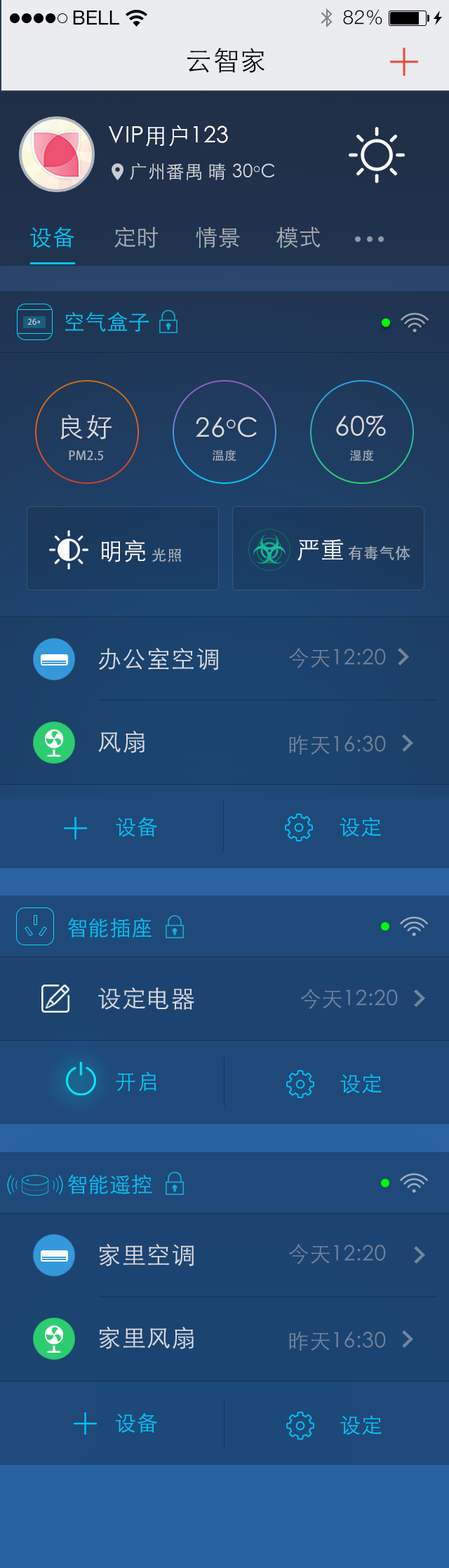
<style>
.page{position:relative;width:449px;height:1568px}
.page>*{position:absolute;margin:0}
.t1{font:19.6px "HelveticaNeue";color:#000000;text-transform:uppercase}
.t2{font:19.6px "HelveticaNeue-Light";letter-spacing:0.025em;color:#000000}
.t3{font:26.6px "STHeitiSC-Light";letter-spacing:0.025em;color:#000000}
.t4{font:22.4px "STHeitiSC-Light";letter-spacing:0.025em;color:#fffefe}
.t5{font:18.2px "STHeitiSC-Light";letter-spacing:0.025em;color:#d6d8db}
.t6{font:22.4px "STHeitiSC-Light";letter-spacing:0.025em;color:#01c5f6}
.t7{font:22.4px "STHeitiSC-Light";letter-spacing:0.025em;color:#a9adb5}
.t8{font:21px "STHeitiSC-Light";letter-spacing:0.025em;color:#01c5f6}
.t9{font:7.8px "AdobeHeitiStd-Regular";letter-spacing:0.025em;color:#c4d0d7}
.t10{font:7.8px "AdobeHeitiStd-Regular";letter-spacing:0.025em}
.t11{font:26.6px "STHeitiSC-Light";letter-spacing:0.025em;color:#d6d9de}
.t12{font:21px "AdobeHeitiStd-Regular";letter-spacing:0.025em;color:#a9b0bc}
.t13{font:21px "AdobeHeitiStd-Regular";letter-spacing:0.025em;color:#a9b0bb}
.t14{font:23.8px "STHeitiSC-Light";letter-spacing:0.025em;color:#ffffff}
.t15{font:15.4px "AdobeHeitiStd-Regular";letter-spacing:0.025em;color:#a8afba}
.t16{font:15.4px "AdobeHeitiStd-Regular";letter-spacing:0.025em;color:#a8b0bc}
.t17{font:23.8px "STHeitiSC-Light";letter-spacing:0.025em;color:#d6dae0}
.t18{font:21px "STHeitiSC-Light";letter-spacing:0.025em;color:#708198}
.t19{font:23.8px "STHeitiSC-Light";letter-spacing:0.025em;color:#d6dae1}
.t20{font:21px "STHeitiSC-Light";letter-spacing:0.025em;color:#70829a}
.t21{font:21px "STHeitiSC-Light";letter-spacing:0.025em;color:#71829c}
.t22{font:21px "STHeitiSC-Light";letter-spacing:0.025em;color:#70829c}
</style>
<div class="page">
<p class="t1" style="left:73px;top:11px;width:46px;height:14px">Bell</p>
<p class="t2" style="left:343px;top:10px;width:39px;height:15px">82%</p>
<p class="t3" style="left:187px;top:48px;width:78px;height:25px">云智家</p>
<p class="t4" style="left:109px;top:125px;width:119px;height:22px">VIP用户123</p>
<p class="t5" style="left:130px;top:163px;width:145px;height:17px">广州番禺 晴 30oC</p>
<p class="t6" style="left:30px;top:227px;width:44px;height:21px">设备</p>
<p class="t7" style="left:114px;top:227px;width:44px;height:21px">定时</p>
<p class="t7" style="left:196px;top:227px;width:44px;height:21px">情景</p>
<p class="t7" style="left:276px;top:227px;width:44px;height:21px">模式</p>
<p class="t8" style="left:65px;top:312px;width:84px;height:20px">空气盒子</p>
<p class="t9" style="left:27px;top:318px;width:9px;height:7px">26</p>
<p class="t10" style="left:37px;top:320px;width:3px;height:3px">o</p>
<p class="t11" style="left:60px;top:414px;width:51px;height:26px">良好</p>
<p class="t11" style="left:196px;top:417px;width:61px;height:21px">26oC</p>
<p class="t11" style="left:336px;top:415px;width:50px;height:22px">60%</p>
<p class="t12" style="left:212px;top:450px;width:24px;height:11px">温度</p>
<p class="t13" style="left:350px;top:450px;width:24px;height:11px">湿度</p>
<p class="t13" style="left:69px;top:450px;width:34px;height:11px">PM2.5</p>
<p class="t14" style="left:102px;top:539px;width:44px;height:23px">明亮</p>
<p class="t14" style="left:297px;top:539px;width:46px;height:22px">严重</p>
<p class="t15" style="left:348px;top:546px;width:62px;height:14px">有毒气体</p>
<p class="t16" style="left:152px;top:548px;width:30px;height:14px">光照</p>
<p class="t17" style="left:98px;top:647px;width:120px;height:23px">办公室空调</p>
<p class="t18" style="left:288px;top:648px;width:98px;height:20px">今天12:20</p>
<p class="t19" style="left:98px;top:731px;width:46px;height:22px">风扇</p>
<p class="t20" style="left:289px;top:735px;width:97px;height:20px">昨天16:30</p>
<p class="t8" style="left:116px;top:817px;width:41px;height:20px">设备</p>
<p class="t8" style="left:339px;top:817px;width:42px;height:20px">设定</p>
<p class="t8" style="left:68px;top:918px;width:83px;height:20px">智能插座</p>
<p class="t19" style="left:98px;top:987px;width:96px;height:23px">设定电器</p>
<p class="t21" style="left:300px;top:989px;width:98px;height:20px">今天12:20</p>
<p class="t8" style="left:116px;top:1072px;width:40px;height:19px">开启</p>
<p class="t8" style="left:340px;top:1074px;width:41px;height:19px">设定</p>
<p class="t8" style="left:68px;top:1175px;width:83px;height:19px">智能遥控</p>
<p class="t19" style="left:99px;top:1243px;width:95px;height:23px">家里空调</p>
<p class="t21" style="left:288px;top:1244px;width:98px;height:20px">今天12:20</p>
<p class="t19" style="left:99px;top:1326px;width:95px;height:23px">家里风扇</p>
<p class="t22" style="left:289px;top:1331px;width:97px;height:20px">昨天16:30</p>
<p class="t8" style="left:116px;top:1413px;width:41px;height:20px">设备</p>
<p class="t8" style="left:340px;top:1415px;width:41px;height:20px">设定</p>
</div>
